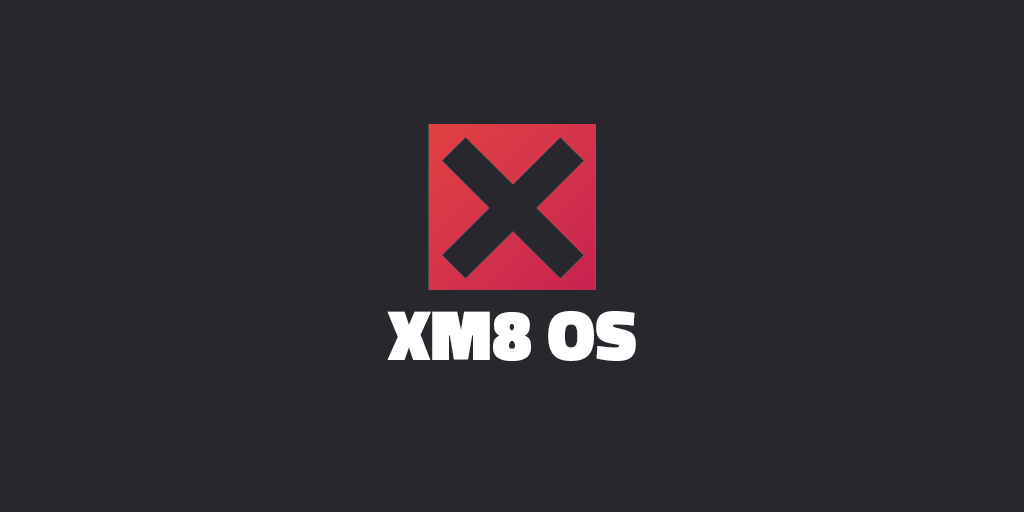
<style>
.page{position:relative;width:1024px;height:512px;background:#27272d}
.page>*{position:absolute;margin:0}
.t1{font:72px "Titillium-Black";color:#ffffff}
</style>
<div class="page">
<p class="t1" style="left:387px;top:311px;width:249px;height:50px">XM8 OS</p>
</div>
